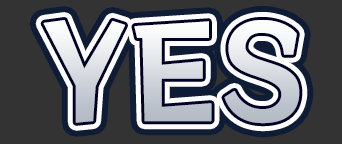
<style>
.page{position:relative;width:342px;height:144px;background:#333333}
.page>*{position:absolute;margin:0}
.t1{font:125px "RocknRollOne-Regular";font-weight:bold}
</style>
<div class="page">
<p class="t1" style="left:43px;top:20px;width:257px;height:104px">YES</p>
</div>
